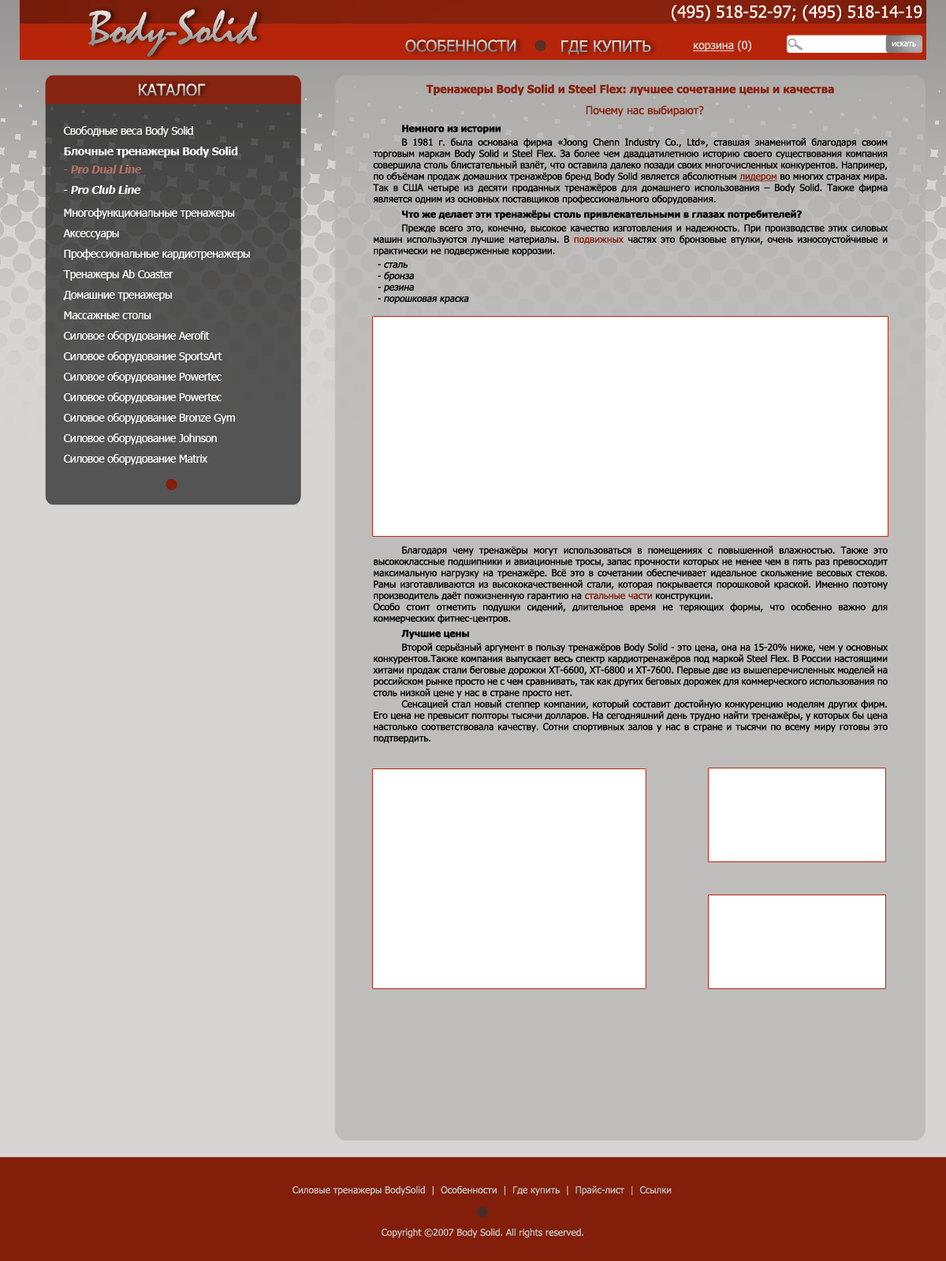
<style>
.page{position:relative;width:946px;height:1261px;background:#d7d5d3}
.page>*{position:absolute;margin:0}
.t1{font:16.5px "Tahoma";color:#ffffff}
.t2{font:47.3px "Mistral"}
.t3{font:15.8px "Tahoma"}
.t4{font:11px "Tahoma";color:#d7d5d3;text-decoration:underline}
.t5{font:11px "Tahoma";color:#d7d5d3}
.t6{font:7.9px "Tahoma";letter-spacing:0.01em;color:#ffffff}
.t7{font:9.5px "Tahoma";color:#000000}
.t8{font:11px "Tahoma-Bold";color:#88210d}
.t9{font:11px "Tahoma";color:#88210d}
.t10{font:9.5px "Tahoma-Bold";color:#000000}
.t11{font:9.5px "Tahoma";color:#872412;text-decoration:underline}
.t12{font:9.5px "Tahoma";color:#872412}
.t13{font:9.5px "Tahoma";color:#000000;font-style:italic}
.t14{font:9.5px "Tahoma";color:#821e0a}
.t15{font:11px/20.5px "Tahoma";letter-spacing:-0.025em;color:#ffffff}
.t16{font:11px/20.5px "Tahoma-Bold";letter-spacing:-0.025em;color:#ffffff}
.t17{font:11px/20.5px "Tahoma-Bold";letter-spacing:-0.025em;color:#b87164;font-style:italic}
.t18{font:11px/20.5px "Tahoma-Bold";letter-spacing:-0.025em;color:#ffffff;font-style:italic}
.t19{font:9.5px "Tahoma";color:#bfbdbc}
</style>
<div class="page">
<p class="t1" style="left:671px;top:5px;width:251px;height:16px">(495) 518-52-97; (495) 518-14-19</p>
<p class="t2" style="left:88px;top:9px;width:169px;height:48px">Body-Solid</p>
<p class="t3" style="left:405px;top:39px;width:111px;height:13px">ОСОБЕННОСТИ</p>
<p class="t3" style="left:561px;top:40px;width:90px;height:15px">ГДЕ КУПИТЬ</p>
<p class="t4" style="left:693px;top:40px;width:58px;height:12px">корзина<span class="t5"> (0)</span></p>
<p class="t6" style="left:891px;top:42px;width:25px;height:4px">искать</p>
<p class="t3" style="left:139px;top:84px;width:67px;height:12px">КАТАЛОГ</p>
<p class="t7" style="left:373px;top:84px;width:514px;height:660px;text-align:center"><span class="t8">Тренажеры Body Solid и Steel Flex: лучшее сочетание цены и качества<br> </span><span class="t9">Почему нас выбирают?<br> </span><span class="t10">Немного из истории<br></span> В 1981 г. была основана фирма «Joong Chenn Industry Сo., Ltd», ставшая знаменитой благодаря своим торговым маркам Body Solid и Steel Flex. За более чем двадцатилетнюю историю своего существования компания совершила столь блистательный взлёт, что оставила далеко позади своих многочисленных конкурентов. Например, по объёмам продаж домашних тренажёров бренд Body Solid является абсолютным <span class="t11">лидером</span> во многих странах мира. Так в США четыре из десяти проданных тренажёров для домашнего использования – Body Solid. Также фирма является одним из основных поставщиков профессионального оборудования.<br> <span class="t10">Что же делает эти тренажёры столь привлекательными в глазах потребителей?<br></span> Прежде всего это, конечно, высокое качество изготовления и надежность. При производстве этих силовых машин используются лучшие материалы. В <span class="t12">подвижных</span> частях это бронзовые втулки, очень износоустойчивые и практически не подверженные коррозии. <br><span class="t13">- сталь<br>- бронза<br>- резина<br>- порошковая краска<br></span> Благодаря чему тренажёры могут использоваться в помещениях с повышенной влажностью. Также это высококлассные подшипники и авиационные тросы, запас прочности которых не менее чем в пять раз превосходит максимальную нагрузку на тренажёре. Всё это в сочетании обеспечивает идеальное скольжение весовых стеков.  Рамы изготавливаются из высококачественной стали, которая покрывается порошковой краской. Именно поэтому производитель даёт пожизненную гарантию на <span class="t14">стальные части</span> конструкции.<br>Особо стоит отметить подушки сидений, длительное время не теряющих формы, что особенно важно для коммерческих фитнес-центров.<br> <span class="t10">Лучшие цены<br></span> Второй серьёзный аргумент в пользу тренажёров Body Solid - это цена, она на 15-20% ниже, чем у основных конкурентов.Также компания выпускает весь спектр кардиотренажёров под маркой Steel Flex. В России настоящими хитами продаж стали беговые дорожки ХТ-6600, ХТ-6800 и ХТ-7600. Первые две из вышеперечисленных моделей на российском рынке просто не с чем сравнивать, так как других беговых дорожек для коммерческого использования по столь низкой цене у нас в стране просто нет.<br> Сенсацией стал новый степпер компании, который составит достойную конкуренцию моделям других фирм. Его цена не превысит полторы тысячи долларов. На сегодняшний день трудно найти тренажёры, у которых бы цена настолько соответствовала качеству. Сотни спортивных залов у нас в стране и тысячи по всему миру готовы это подтвердить.</p>
<p class="t15" style="left:63px;top:126px;width:187px;height:339px">Свободные веса Body Solid<br><span class="t16">Блочные тренажеры Body Solid<br><br>    <br></span>Многофункциональные тренажеры<br>Аксессуары<br>Профессиональные кардиотренажеры<br>Тренажеры Ab Coaster<br>Домашние тренажеры<br>Массажные столы<br>Силовое оборудование Aerofit <br>Силовое оборудование SportsArt<br>Силовое оборудование Powertec<br>Силовое оборудование Powertec<br>Силовое оборудование Bronze Gym<br>Cиловое оборудование Johnson<br>Силовое оборудование Matrix</p>
<p class="t17" style="left:64px;top:165px;width:78px;height:29px">- Pro Dual Line<br><span class="t18">- Pro Club Line</span></p>
<p class="t19" style="left:292px;top:1185px;width:379px;height:11px">Силовые тренажеры BodySolid  |  Особенности  |  Где купить  |  Прайс-лист  |  Ссылки</p>
<p class="t19" style="left:381px;top:1228px;width:202px;height:10px">Copyright ©2007 Body Solid. All rights reserved.</p>
</div>
